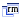
<style>
.page{position:relative;width:20px;height:20px;background:#ffffff}
.page>*{position:absolute;margin:0}
.t1{font:9px "NovareseITCbyBT-Book";letter-spacing:0.1em;color:#010101}
</style>
<div class="page">
<p class="t1" style="left:8px;top:7px;width:10px;height:5px">rm</p>
</div>
